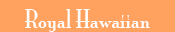
<style>
.page{position:relative;width:175px;height:32px;background:#ffa15f}
.page>*{position:absolute;margin:0}
.t1{font:24px "MonaLisaSolidITCTT";color:#fefefe}
</style>
<div class="page">
<p class="t1" style="left:25px;top:9px;width:125px;height:23px">Royal Hawaiian</p>
</div>
